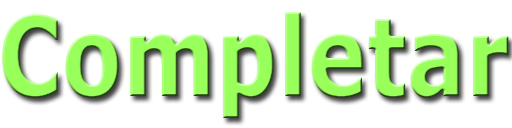
<style>
.page{position:relative;width:512px;height:128px;background:#ffffff}
.page>*{position:absolute;margin:0}
.t1{font:109.7px "Verdana-Bold";color:#99ff5b;scale:0.81 1}
</style>
<div class="page">
<p class="t1" style="left:2px;top:12px;width:507px;height:106px">Completar</p>
</div>
